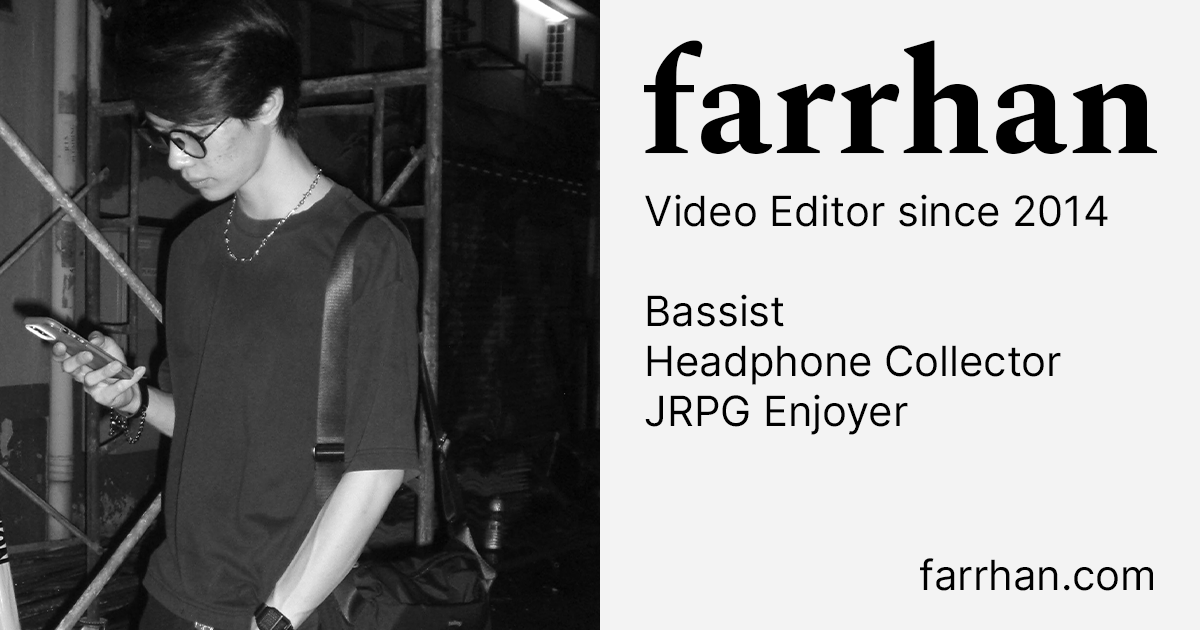
<style>
.page{position:relative;width:1200px;height:630px;background:#f3f3f3}
.page>*{position:absolute;margin:0}
.t1{font:149px "Spectral-Bold";color:#000000}
.t2{font:41.7px "Inter-Regular";color:#000000}
</style>
<div class="page">
<p class="t1" style="left:644px;top:40px;width:513px;height:114px">farrhan</p>
<p class="t2" style="left:645px;top:194px;width:463px;height:241px">Video Editor since 2014<br><br>Bassist<br>Headphone Collector<br>JRPG Enjoyer</p>
<p class="t2" style="left:920px;top:558px;width:233px;height:33px">farrhan.com</p>
</div>
